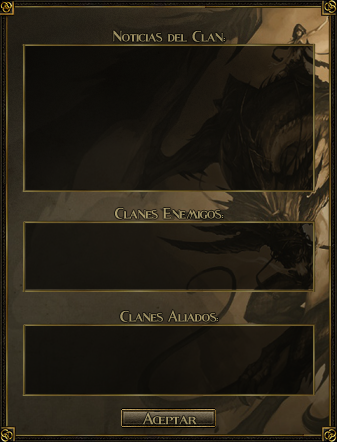
<style>
.page{position:relative;width:337px;height:442px}
.page>*{position:absolute;margin:0}
.t1{font:28.9px "Fleet-Street";color:#9c8f62;scale:0.94 1}
.t2{font:28.9px "Fleet-Street";color:#a79969;scale:0.94 1}
.t3{font:28.9px "Fleet-Street";color:#a29566;scale:0.94 1}
.t4{font:30px "Fleet-Street";color:#a19466}
</style>
<div class="page">
<p class="t1" style="left:113px;top:30px;width:112px;height:12px">Noticias del Clan:</p>
<p class="t2" style="left:115px;top:207px;width:109px;height:12px">Clanes Enemigos:</p>
<p class="t3" style="left:120px;top:309px;width:98px;height:13px">Clanes Aliados:</p>
<p class="t4" style="left:142px;top:412px;width:55px;height:13px">Aceptar</p>
</div>
